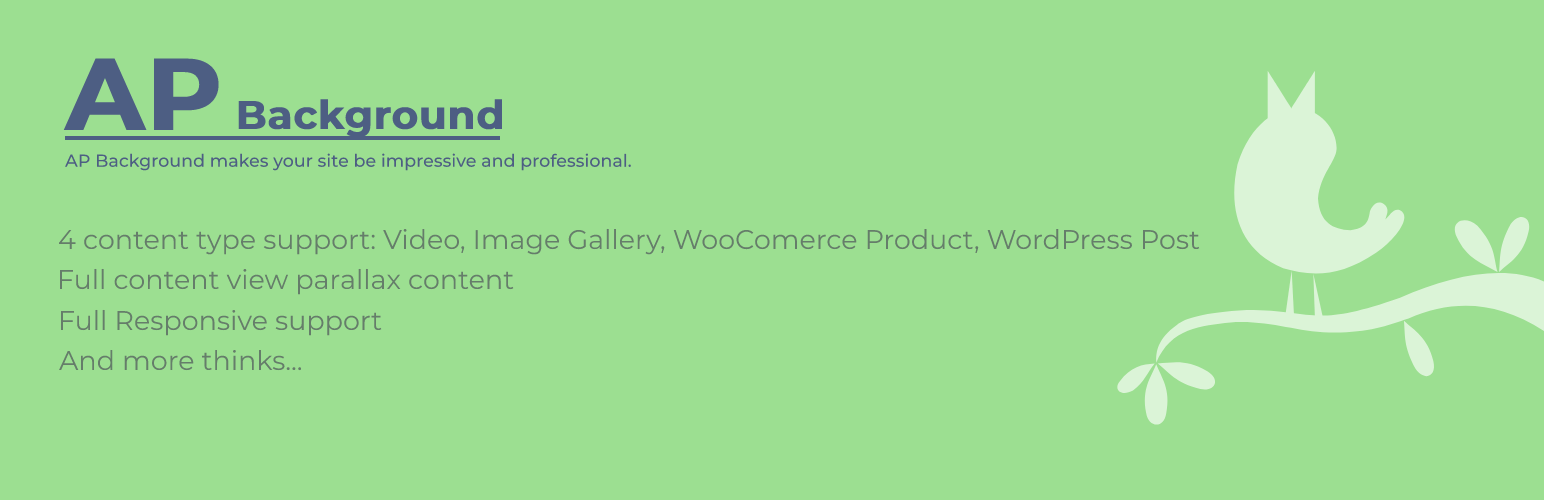
<style>
.page{position:relative;width:1544px;height:500px;background:#9cdf91}
.page>*{position:absolute;margin:0}
.t1{font:102px "Montserrat-Bold";color:#4d5e83;font-weight:bold}
.t2{font:40px "Montserrat-Bold";color:#4d5e83;font-weight:bold}
.t3{font:30px "Montserrat-Medium";color:#4d5e83}
.t4{font:27px "Montserrat-Regular";color:#657d6a}
</style>
<div class="page">
<p class="t1" style="left:63px;top:58px;width:156px;height:72px">AP</p>
<p class="t2" style="left:238px;top:99px;width:264px;height:39px">Background</p>
<p class="t3" style="left:64px;top:153px;width:567px;height:18px">AP Background makes your site be impressive and professional.</p>
<p class="t4" style="left:59px;top:228px;width:1141px;height:27px">4 content type support: Video, Image Gallery, WooComerce Product, WordPress Post</p>
<p class="t4" style="left:60px;top:268px;width:454px;height:27px">Full content view parallax content</p>
<p class="t4" style="left:61px;top:309px;width:321px;height:27px">Full Responsive support</p>
<p class="t4" style="left:59px;top:349px;width:243px;height:22px">And more thinks...</p>
</div>
